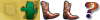
<style>
.page{position:relative;width:100px;height:20px;background:#ffffff}
.page>*{position:absolute;margin:0}
.t1{font:24px "Magneto-Bold"}
</style>
<div class="page">
<p class="t1" style="left:84px;top:2px;width:15px;height:16px">?</p>
</div>
